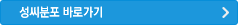
<style>
.page{position:relative;width:238px;height:25px;background:#1c97dc}
.page>*{position:absolute;margin:0}
.t1{font:12.2px "RixGoB";color:#ffffff;scale:0.92 1}
</style>
<div class="page">
<p class="t1" style="left:19px;top:6px;width:83px;height:12px">성씨분포 바로가기</p>
</div>
